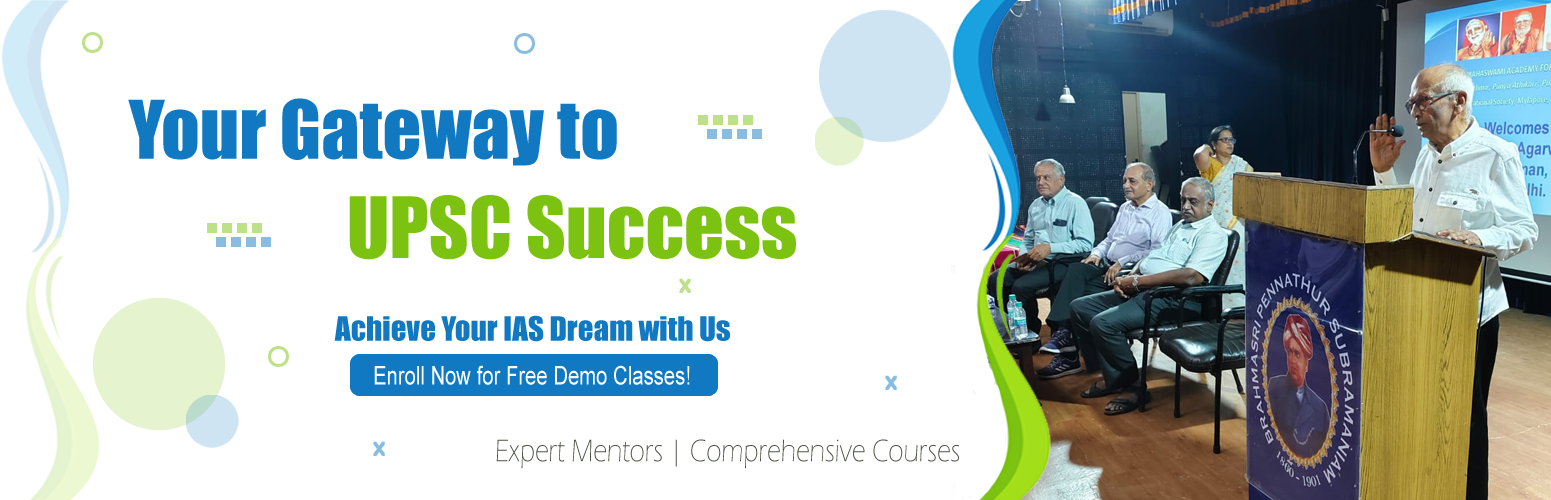
<style>
.page{position:relative;width:1551px;height:500px;background:#ffffff}
.page>*{position:absolute;margin:0}
.t1{font:74.8px "Impact";color:#1179c2}
.t2{font:78px "Impact";color:#7cc211}
.t3{font:20.7px "BerlinSansFBDemi-Bold";color:#bde088}
.t4{font:31px "Impact";color:#1179c2}
.t5{font:25.8px "ArialMT";color:#ffffff;scale:0.78 1}
.t6{font:20.7px "BerlinSansFBDemi-Bold";color:#88bce0}
.t7{font:32.3px "ErasITC-Light";color:#4d5344;scale:0.83 1}
</style>
<div class="page">
<p class="t1" style="left:128px;top:98px;width:489px;height:68px">Your Gateway to</p>
<p class="t2" style="left:349px;top:195px;width:447px;height:65px">UPSC Success</p>
<p class="t3" style="left:679px;top:278px;width:12px;height:15px">X</p>
<p class="t4" style="left:334px;top:315px;width:396px;height:27px">Achieve Your IAS Dream with Us</p>
<p class="t5" style="left:374px;top:365px;width:316px;height:20px">Enroll Now for Free Demo Classes!</p>
<p class="t6" style="left:885px;top:375px;width:12px;height:15px">X</p>
<p class="t6" style="left:373px;top:441px;width:12px;height:15px">X</p>
<p class="t7" style="left:496px;top:439px;width:463px;height:30px">Expert Mentors | Comprehensive Courses</p>
</div>
